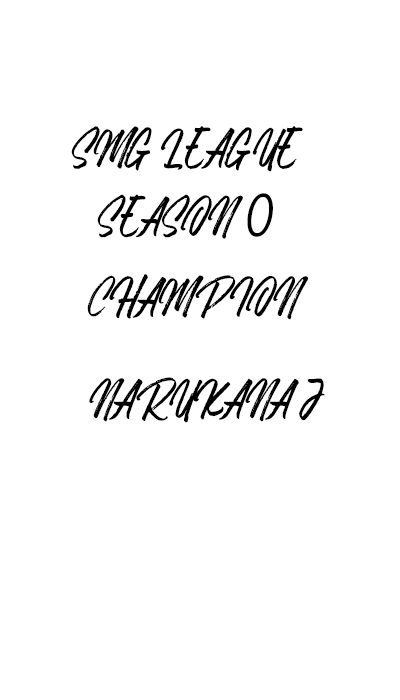
<style>
.page{position:relative;width:400px;height:700px;background:#ffffff}
.page>*{position:absolute;margin:0}
.t1{font:57px "Redemption";letter-spacing:-0.04em;color:#000000;font-weight:bold;font-style:italic;scale:0.92 1}
.t2{font:57px "Gulim";letter-spacing:-0.04em;color:#000000;font-weight:bold;font-style:italic;scale:0.92 1}
</style>
<div class="page">
<p class="t1" style="left:71px;top:126px;width:232px;height:113px;text-align:center">SMG LEAGUE<br>SEASON <span class="t2">0</span></p>
<p class="t1" style="left:87px;top:274px;width:222px;height:46px">CHAMPION</p>
<p class="t1" style="left:89px;top:377px;width:236px;height:46px">NARUKANA J</p>
</div>
